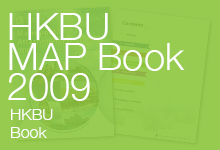
<style>
.page{position:relative;width:220px;height:150px;background:#97cb50}
.page>*{position:absolute;margin:0}
.t1{font:38px/30px "HelveticaNeue-Light";color:#ffffff}
.t2{font:16px/18px "HelveticaNeue-Light";color:#ffffff}
</style>
<div class="page">
<p class="t1" style="left:8px;top:13px;width:177px;height:88px">HKBU <br>MAP Book<br>2009</p>
<p class="t2" style="left:11px;top:109px;width:42px;height:29px">HKBU<br>Book</p>
</div>
